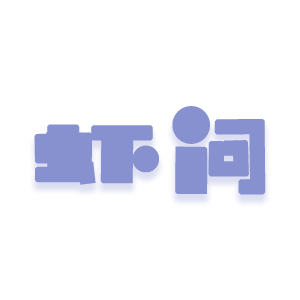
<style>
.page{position:relative;width:300px;height:300px;background:#ffffff}
.page>*{position:absolute;margin:0}
.t1{font:145.8px "HYZhuZiTongNianTiW";letter-spacing:0.02em;color:#8891d0;font-weight:bold}
</style>
<div class="page">
<p class="t1" style="left:34px;top:106px;width:232px;height:89px">虾问</p>
</div>
